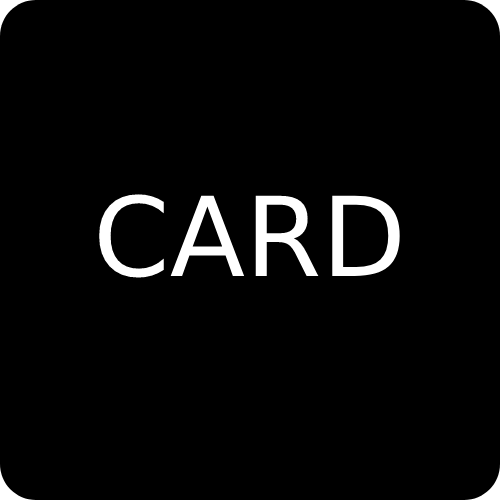
<style>
.page{position:relative;width:500px;height:500px;background:#000000}
.page>*{position:absolute;margin:0}
.t1{font:110px "DejaVuSans";color:#ffffff}
</style>
<div class="page">
<p class="t1" style="left:99px;top:194px;width:301px;height:84px">CARD</p>
</div>
